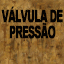
<style>
.page{position:relative;width:64px;height:64px}
.page>*{position:absolute;margin:0}
.t1{font:17px/16px "Arial-Black";letter-spacing:-0.09em;color:#050302;text-transform:uppercase;font-weight:bold;scale:0.56 1}
</style>
<div class="page">
<p class="t1" style="left:1px;top:6px;width:62px;height:33px;text-align:center">Válvula de<br>pressão</p>
</div>
